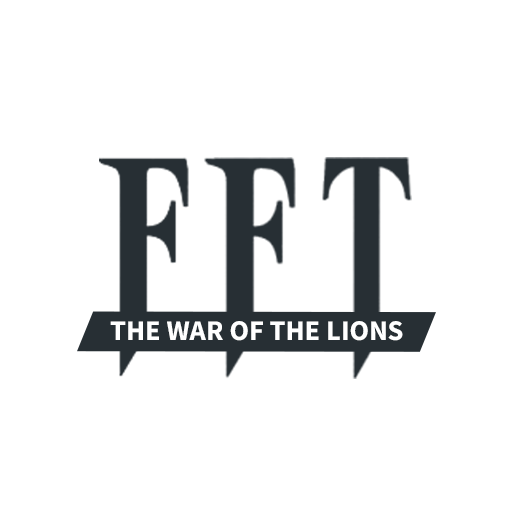
<style>
.page{position:relative;width:512px;height:512px;background:#ffffff}
.page>*{position:absolute;margin:0}
.t1{font:28.5px "SourceSansPro-Bold";color:#ffffff}
</style>
<div class="page">
<p class="t1" style="left:110px;top:321px;width:293px;height:20px">THE WAR OF THE LIONS</p>
</div>
